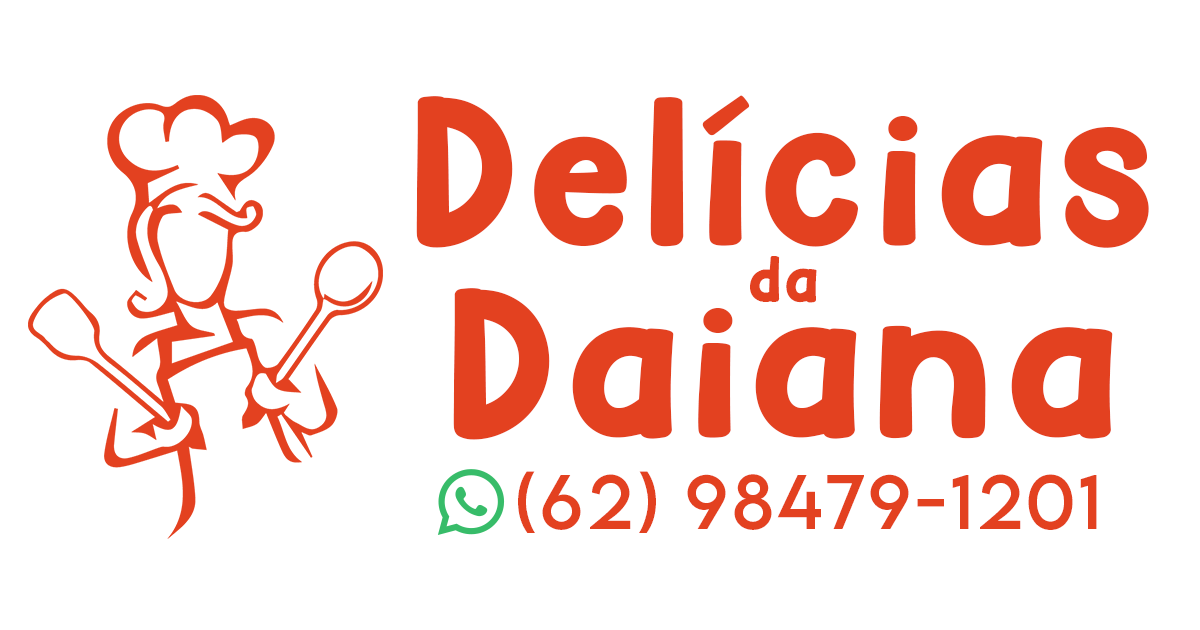
<style>
.page{position:relative;width:1200px;height:630px;background:#ffffff}
.page>*{position:absolute;margin:0}
.t1{font:199.2px/191.7px "Hey-Comic";letter-spacing:0.05em;color:#e34120}
.t2{font:60.6px "Hey-Comic";letter-spacing:0.05em;color:#e34120}
.t3{font:68.1px "LEMONMILK-Regular";letter-spacing:0.05em;color:#e34120}
</style>
<div class="page">
<p class="t1" style="left:416px;top:95px;width:733px;height:345px;text-align:center">Delícias<br>Daiana</p>
<p class="t2" style="left:750px;top:256px;width:67px;height:47px">da</p>
<p class="t3" style="left:518px;top:471px;width:579px;height:62px">(62) 98479-1201</p>
</div>
